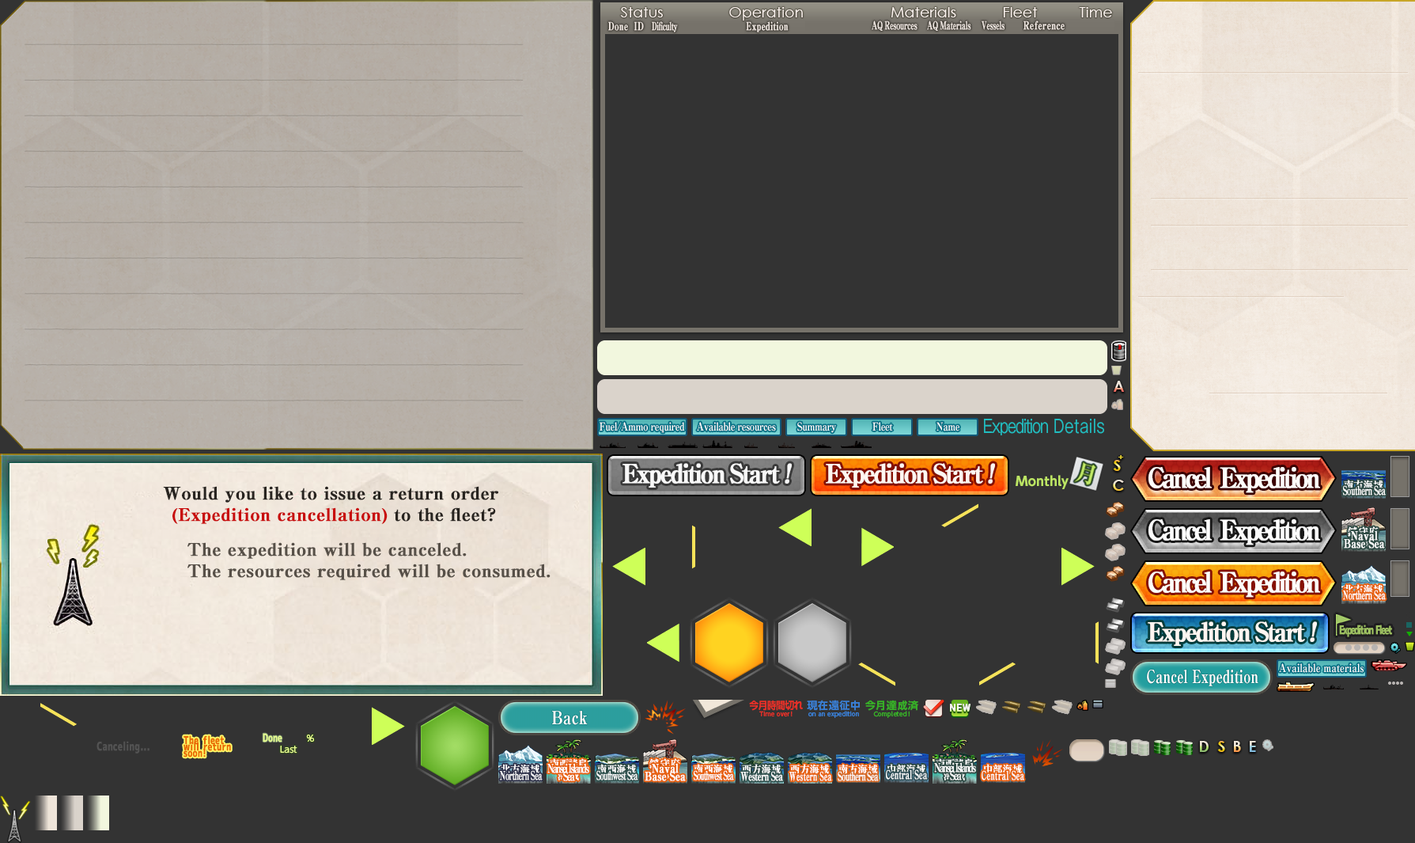
<style>
.page{position:relative;width:1415px;height:843px;background:#333333}
.page>*{position:absolute;margin:0}
.t1{font:11.1px "RyuminPro-ExBold";letter-spacing:-0.08em;color:#f3ebe6;font-weight:bold;scale:0.64 1}
.t2{font:11.1px "RyuminPro-ExBold";color:#f3ebe6;font-weight:bold;scale:0.72 1}
.t3{font:11.1px "RyuminPro-ExBold";letter-spacing:-0.06em;color:#f3ebe6;font-weight:bold;scale:0.65 1}
.t4{font:11.1px "RyuminPro-ExBold";color:#f3ebe6;font-weight:bold;scale:0.75 1}
.t5{font:11.1px "RyuminPro-ExBold";letter-spacing:-0.04em;color:#ffffff;scale:0.82 1}
.t6{font:18.2px "GothicMB101Pro-Regular";letter-spacing:-0.1em;color:#21bdc0;scale:0.82 1}
.t7{font:18.2px "GothicMB101Pro-Regular";color:#21bdc0;scale:0.82 1}
.t8{font:26.1px "RyuminPro-ExBold";letter-spacing:-0.1em;color:#fff6f1;font-weight:bold;scale:0.9 1}
.t9{font:26.1px "RyuminPro-ExBold";letter-spacing:-0.1em;color:#fff6f1;font-weight:bold;font-style:italic;scale:0.9 1}
.t10{font:27.7px "RyuminPro-ExBold";letter-spacing:-0.14em;color:#fffdfa;font-weight:bold;scale:0.9 1}
.t11{font:17.4px "RyuminPro-ExBold";color:#282420;font-weight:bold}
.t12{font:17.4px "RyuminPro-ExBold";color:#c80d0d;font-weight:bold}
.t13{font:11.9px "RyuminPro-ExBold";letter-spacing:-0.08em;color:#ffffff;font-weight:bold;scale:0.64 1}
.t14{font:11.9px/7.9px "RyuminPro-ExBold";color:#ffffff;font-weight:bold;scale:0.77 1}
.t15{font:17.4px "RyuminPro-ExBold";color:#575048;font-weight:bold}
.t16{font:11.9px "RyuminPro-ExBold";letter-spacing:-0.06em;color:#ffffff;font-weight:bold;scale:0.6 1}
.t17{font:11.9px "07LightNovelPOP";letter-spacing:-0.18em;color:#9dc061;font-weight:bold;scale:0.72 1}
.t18{font:11.1px "RyuminPro-ExBold";color:#ffffff;scale:0.82 1}
.t19{font:18.2px "RyuminPro-ExBold";color:#ffffff;scale:0.72 1}
.t20{font:18.2px "RyuminPro-ExBold";color:#ffffff;scale:0.82 1}
.t21{font:11.1px/6.3px "07LightNovelPOP";color:#e96700;font-weight:bold;scale:0.72 1}
.t22{font:11.1px "07LightNovelPOP";color:#e9ff90;scale:0.72 1}
.t23{font:11.9px "07LightNovelPOP";color:#535353;font-weight:bold;scale:0.72 1}
.t24{font:11.9px/7.9px "RyuminPro-ExBold";letter-spacing:-0.18em;color:#ffffff;font-weight:bold;scale:0.72 1}
.t25{font:11.9px "RyuminPro-ExBold";letter-spacing:-0.1em;color:#ffffff;font-weight:bold;scale:0.65 1}
.t26{font:11.9px "RyuminPro-ExBold";letter-spacing:-0.1em;color:#ffffff;font-weight:bold;scale:0.59 1}
.t27{font:11.9px "RyuminPro-ExBold";letter-spacing:-0.12em;color:#ffffff;font-weight:bold;scale:0.6 1}
.t28{font:11.9px "RyuminPro-ExBold";letter-spacing:-0.08em;color:#ffffff;font-weight:bold;scale:0.67 1}
.t29{font:11.9px "RyuminPro-ExBold";color:#ffffff;font-weight:bold;scale:0.58 1}
.t30{font:11.9px "RyuminPro-ExBold";letter-spacing:-0.1em;color:#ffffff;font-weight:bold;scale:0.63 1}
.t31{font:11.9px "RyuminPro-ExBold";letter-spacing:-0.02em;color:#ffffff;font-weight:bold;scale:0.63 1}
.t32{font:11.9px "RyuminPro-ExBold";color:#ffffff;font-weight:bold;scale:0.63 1}
</style>
<div class="page">
<p class="t1" style="left:608px;top:21px;width:70px;height:11px"><span class="t2">Done  ID  </span> Dificulty</p>
<p class="t2" style="left:746px;top:21px;width:43px;height:11px">Expedition</p>
<p class="t3" style="left:872px;top:21px;width:46px;height:10px">AQ Resources</p>
<p class="t3" style="left:927px;top:21px;width:44px;height:10px">AQ Materials</p>
<p class="t3" style="left:982px;top:21px;width:23px;height:9px">Vessels</p>
<p class="t4" style="left:1024px;top:21px;width:41px;height:9px">Reference</p>
<p class="t5" style="left:600px;top:422px;width:85px;height:11px">Fuel/Ammo required</p>
<p class="t5" style="left:697px;top:422px;width:79px;height:9px">Available resources</p>
<p class="t5" style="left:797px;top:422px;width:39px;height:11px">Summary</p>
<p class="t5" style="left:873px;top:422px;width:20px;height:9px">Fleet</p>
<p class="t5" style="left:937px;top:422px;width:23px;height:9px">Name</p>
<p class="t6" style="left:984px;top:418px;width:64px;height:17px">Expedition</p>
<p class="t7" style="left:1055px;top:418px;width:49px;height:16px">Details</p>
<p class="t8" style="left:826px;top:463px;width:169px;height:24px">Expedition Start <span class="t9">!</span></p>
<p class="t10" style="left:1149px;top:467px;width:171px;height:26px">Cancel  Expedition</p>
<p class="t11" style="left:163px;top:486px;width:335px;height:38px;text-align:center">Would you like to issue a return order <br><span class="t12">(Expedition cancellation)</span> to the fleet?</p>
<p class="t13" style="left:1343px;top:485px;width:43px;height:10px">Southern Sea</p>
<p class="t14" style="left:1344px;top:530px;width:41px;height:18px;text-align:center">Naval<br>Base Sea</p>
<p class="t15" style="left:187px;top:542px;width:364px;height:38px">The expedition will be canceled.<br>The resources required will be consumed.</p>
<p class="t10" style="left:1149px;top:571px;width:171px;height:26px">Cancel  Expedition</p>
<p class="t16" style="left:1343px;top:589px;width:43px;height:11px">Northern Sea</p>
<p class="t8" style="left:1148px;top:621px;width:169px;height:25px">Expedition Start <span class="t9">!</span></p>
<p class="t17" style="left:1339px;top:624px;width:53px;height:13px">Expedition Fleet</p>
<p class="t18" style="left:1279px;top:663px;width:85px;height:9px">Available materials</p>
<p class="t19" style="left:1147px;top:669px;width:112px;height:17px">Cancel Expedition</p>
<p class="t20" style="left:552px;top:710px;width:36px;height:15px">Back</p>
<p class="t21" style="left:184px;top:735px;width:47px;height:22px">The fleet<br>will return <br>soon!</p>
<p class="t22" style="left:263px;top:733px;width:19px;height:9px">Done</p>
<p class="t23" style="left:97px;top:740px;width:53px;height:13px">Canceling...</p>
<p class="t24" style="left:934px;top:762px;width:42px;height:18px;text-align:center">Nansei Islands <br>Sea</p>
<p class="t25" style="left:500px;top:770px;width:43px;height:10px">Northern Sea</p>
<p class="t24" style="left:547px;top:763px;width:42px;height:18px;text-align:center">Nansei Islands <br>Sea</p>
<p class="t26" style="left:596px;top:770px;width:42px;height:10px">Southwest Sea</p>
<p class="t14" style="left:645px;top:763px;width:41px;height:18px;text-align:center">Naval<br>Base Sea</p>
<p class="t27" style="left:693px;top:770px;width:41px;height:10px">Southwest Sea</p>
<p class="t28" style="left:740px;top:771px;width:43px;height:10px">Western Sea</p>
<p class="t29" style="left:790px;top:771px;width:42px;height:10px">Western Sea</p>
<p class="t30" style="left:838px;top:771px;width:41px;height:10px">Southern Sea</p>
<p class="t31" style="left:886px;top:769px;width:42px;height:10px">Central Sea</p>
<p class="t32" style="left:982px;top:770px;width:42px;height:10px">Central Sea</p>
</div>
